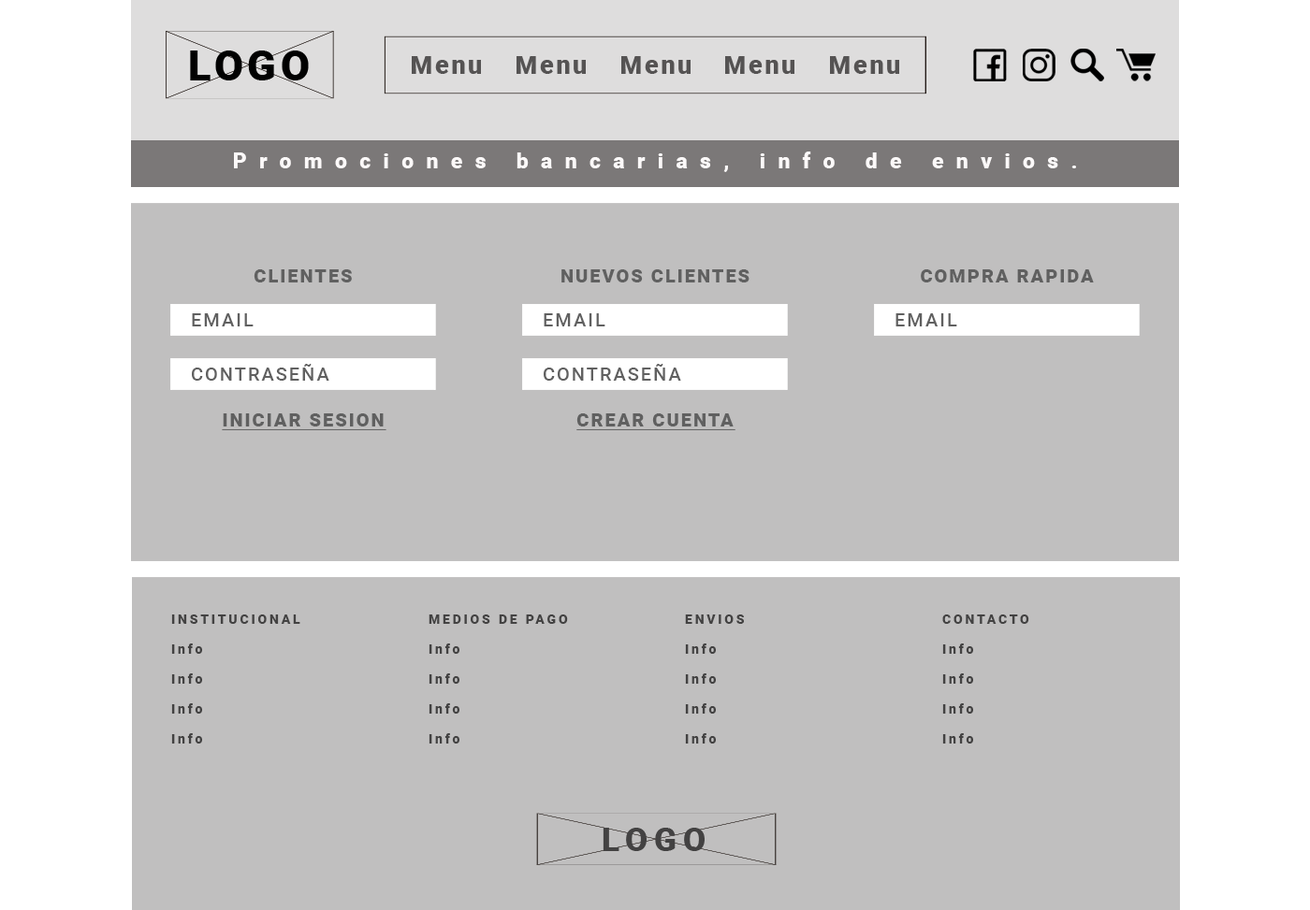
<style>
.page{position:relative;width:1310px;height:910px;background:#c0bfbf}
.page>*{position:absolute;margin:0}
.t1{font:21.5px "Roboto-Black";letter-spacing:0.58em;color:#fcf9f9}
.t2{font:18.7px "Roboto-Black";letter-spacing:0.1em;color:#606060}
.t3{font:18.7px "Roboto-Medium";letter-spacing:0.1em;color:#606060}
.t4{font:18.7px "Roboto-Black";letter-spacing:0.1em;color:#606060;text-decoration:underline}
.t5{font:13.1px/29.9px "Roboto-Black";letter-spacing:0.2em;color:#434242}
</style>
<div class="page">
<p class="t1" style="left:234px;top:152px;width:842px;height:20px">Promociones bancarias, info de envios.</p>
<p class="t2" style="left:254px;top:269px;width:98px;height:14px">CLIENTES</p>
<p class="t2" style="left:561px;top:269px;width:188px;height:14px">NUEVOS CLIENTES</p>
<p class="t2" style="left:921px;top:269px;width:173px;height:14px">COMPRA RAPIDA</p>
<p class="t3" style="left:192px;top:313px;width:62px;height:14px">EMAIL</p>
<p class="t3" style="left:544px;top:313px;width:61px;height:14px">EMAIL</p>
<p class="t3" style="left:895px;top:313px;width:62px;height:14px">EMAIL</p>
<p class="t3" style="left:192px;top:364px;width:137px;height:17px">CONTRASEÑA</p>
<p class="t3" style="left:544px;top:364px;width:137px;height:17px">CONTRASEÑA</p>
<p class="t4" style="left:222px;top:414px;width:164px;height:16px">INICIAR SESION</p>
<p class="t4" style="left:576px;top:414px;width:159px;height:16px">CREAR CUENTA</p>
<p class="t5" style="left:171px;top:615px;width:129px;height:129px">INSTITUCIONAL<br>Info<br>Info<br>Info<br>Info</p>
<p class="t5" style="left:429px;top:615px;width:139px;height:129px">MEDIOS DE PAGO<br>Info<br>Info<br>Info<br>Info</p>
<p class="t5" style="left:685px;top:615px;width:59px;height:129px">ENVIOS<br>Info<br>Info<br>Info<br>Info</p>
<p class="t5" style="left:942px;top:615px;width:87px;height:129px">CONTACTO<br>Info<br>Info<br>Info<br>Info</p>
</div>
